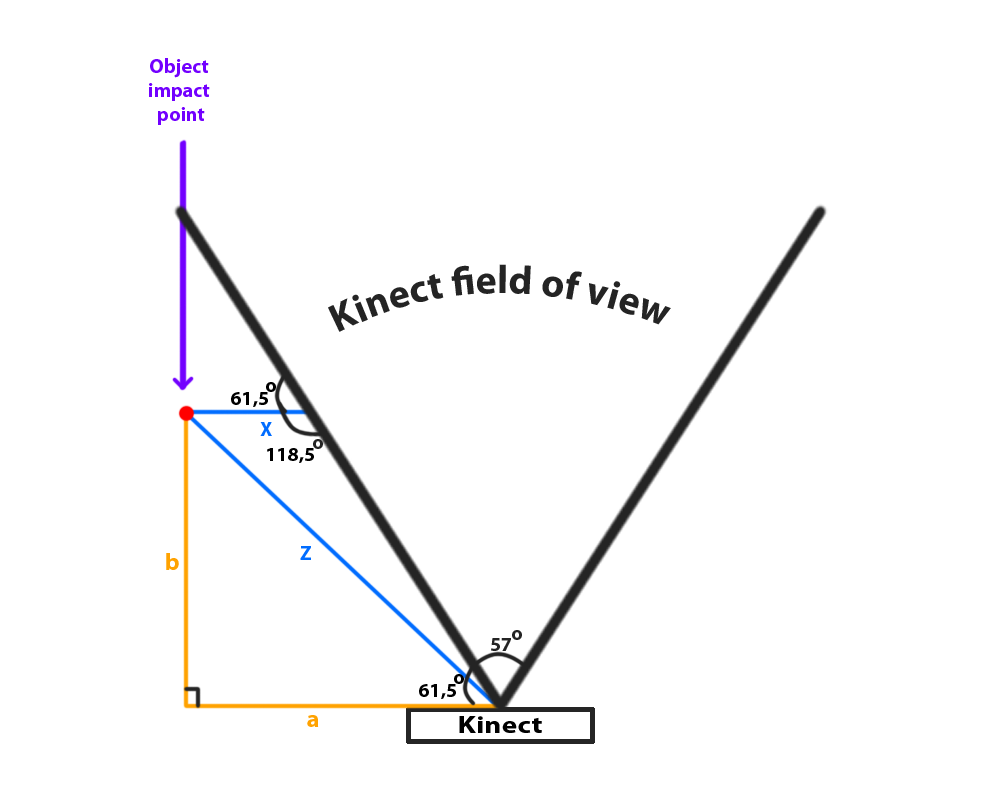
<style>
.page{position:relative;width:1000px;height:800px;background:#ffffff}
.page>*{position:absolute;margin:0}
.t1{font:20px "MyriadPro-Bold";color:#7200ff}
.t2{font:40px "MyriadPro-Bold";color:#242424}
.t3{font:20px "MyriadPro-Bold";color:#000000}
.t4{font:20px "MyriadPro-Bold";color:#006cff}
.t5{font:20px "MyriadPro-Bold";color:#242424}
.t6{font:24px "MyriadPro-Bold";color:#ffa200}
.t7{font:24px "MyriadPro-Bold";color:#000000;scale:1.25 1}
</style>
<div class="page">
<p class="t1" style="left:149px;top:58px;width:61px;height:67px;text-align:center">Object <br>impact <br>point</p>
<p class="t2" style="left:328px;top:264px;width:343px;height:68px;text-align:center">Kinect field of view</p>
<p class="t3" style="left:266px;top:382px;width:10px;height:10px">o</p>
<p class="t3" style="left:231px;top:392px;width:37px;height:15px">61,5</p>
<p class="t4" style="left:260px;top:422px;width:12px;height:14px">X</p>
<p class="t3" style="left:267px;top:448px;width:47px;height:15px">118,5</p>
<p class="t5" style="left:313px;top:439px;width:10px;height:10px">o</p>
<p class="t6" style="left:166px;top:553px;width:13px;height:17px">b</p>
<p class="t4" style="left:300px;top:546px;width:11px;height:14px">Z</p>
<p class="t5" style="left:512px;top:630px;width:10px;height:10px">o</p>
<p class="t5" style="left:491px;top:638px;width:20px;height:13px">57</p>
<p class="t3" style="left:454px;top:674px;width:10px;height:10px">o</p>
<p class="t3" style="left:419px;top:684px;width:37px;height:15px">61,5</p>
<p class="t6" style="left:307px;top:715px;width:12px;height:12px">a</p>
<p class="t7" style="left:459px;top:716px;width:83px;height:17px">Kinect</p>
</div>
